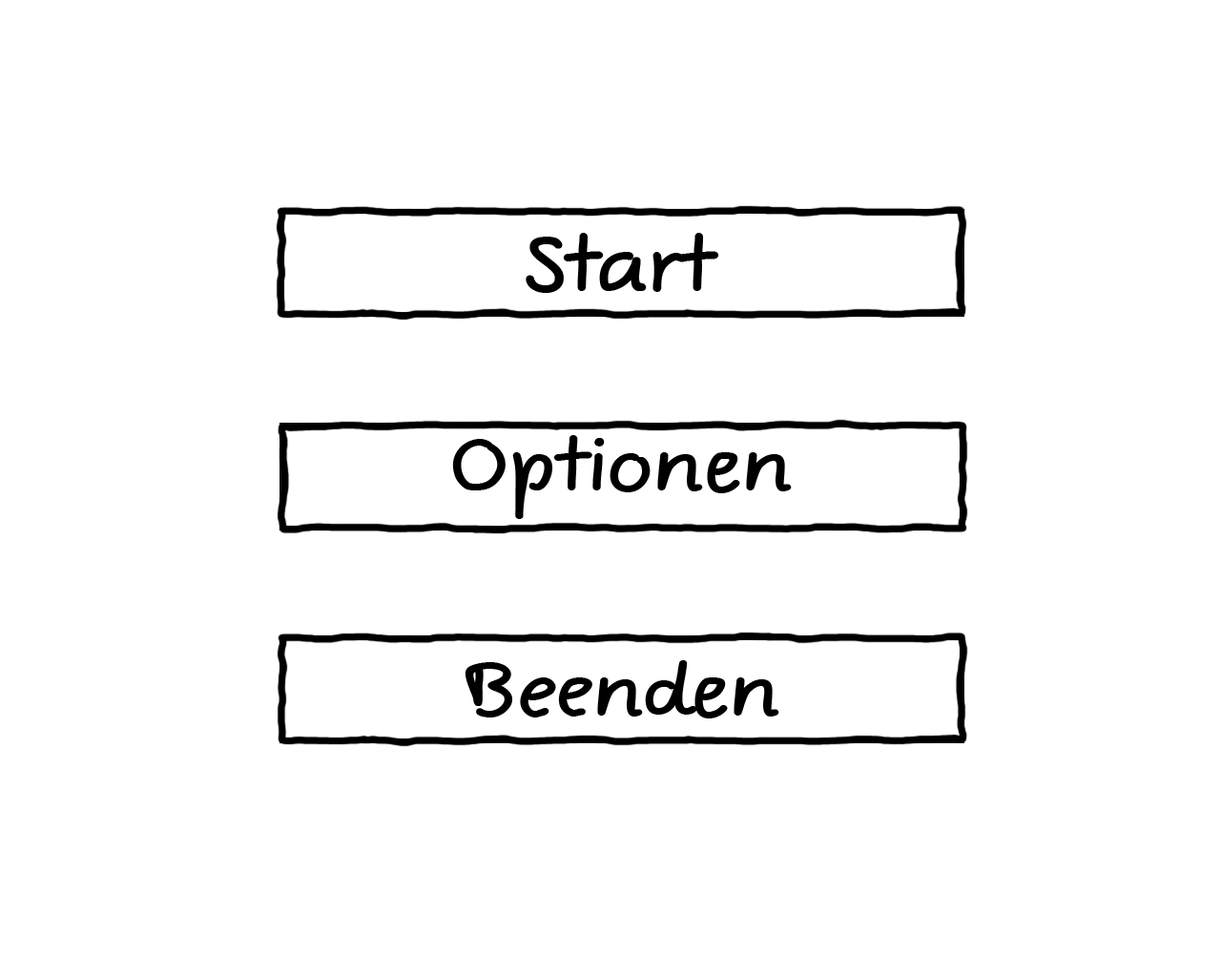
<style>
.page{position:relative;width:1221px;height:977px;background:#ffffff}
.page>*{position:absolute;margin:0}
.t1{font:74.5px "ComicJensFreePro";color:#000000;scale:1.13 1}
.t2{font:71.3px "ComicJensFreePro";color:#000000;scale:1.13 1}
</style>
<div class="page">
<p class="t1" style="left:526px;top:233px;width:193px;height:60px">Start</p>
<p class="t2" style="left:452px;top:435px;width:340px;height:84px">Optionen</p>
<p class="t2" style="left:465px;top:660px;width:314px;height:58px">Beenden</p>
</div>
